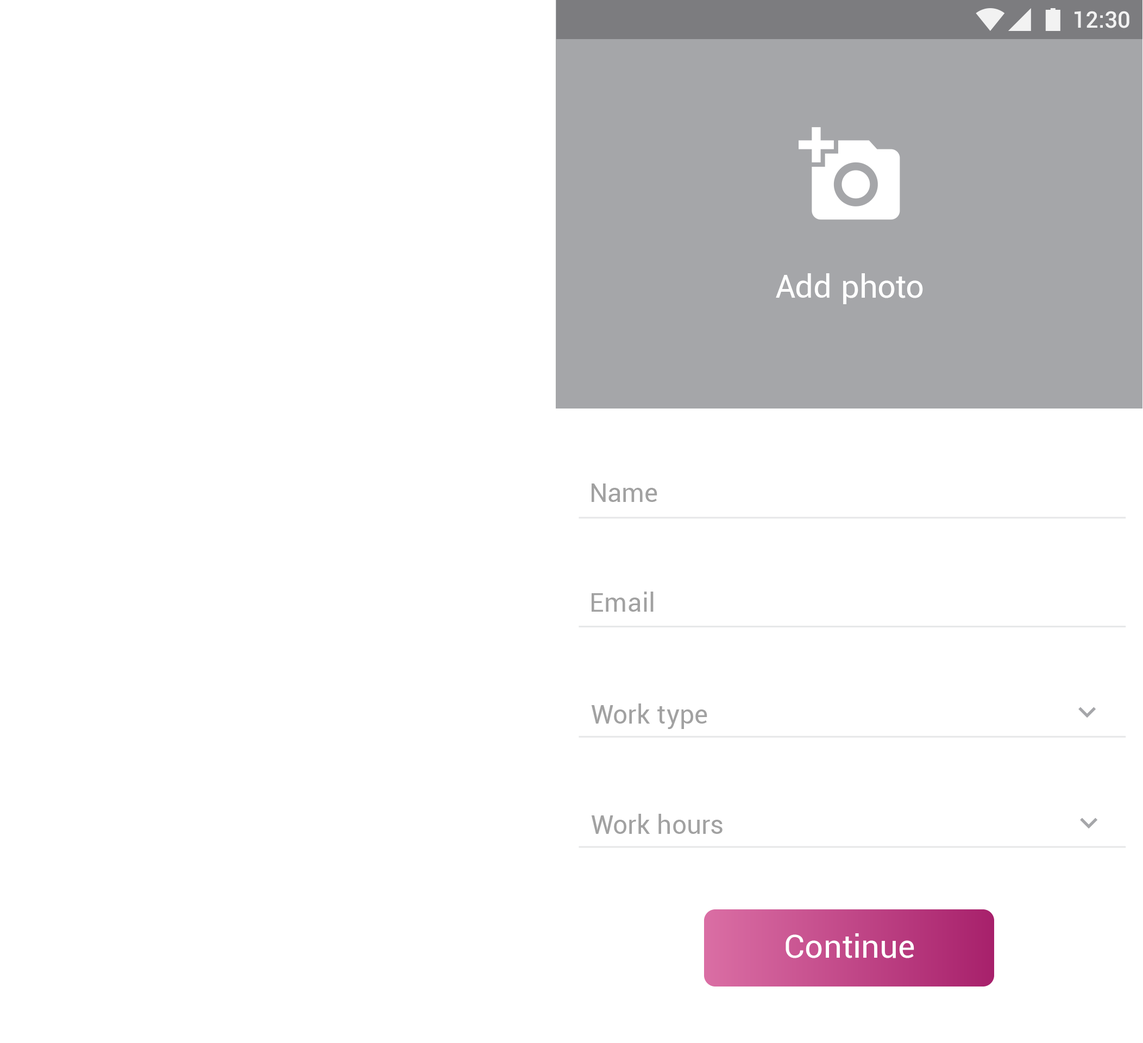
<style>
.page{position:relative;width:1143px;height:1043px;background:#ffffff}
.page>*{position:absolute;margin:0}
.t1{font:22.8px "Roboto-Medium";color:#ffffff}
.t2{font:32.6px "Roboto-Regular";letter-spacing:0.01em;color:#ffffff}
.t3{font:26.1px "Roboto-Regular";letter-spacing:0.01em;color:#a1a1a1}
.t4{font:32.6px "Roboto-Regular";color:#ffffff}
</style>
<div class="page">
<p class="t1" style="left:1075px;top:11px;width:55px;height:17px">12:30</p>
<p class="t2" style="left:776px;top:273px;width:147px;height:31px">Add photo</p>
<p class="t3" style="left:592px;top:484px;width:65px;height:18px">Name</p>
<p class="t3" style="left:592px;top:592px;width:62px;height:20px">Email</p>
<p class="t3" style="left:591px;top:704px;width:116px;height:25px">Work type</p>
<p class="t3" style="left:591px;top:814px;width:132px;height:20px">Work hours</p>
<p class="t4" style="left:786px;top:933px;width:128px;height:25px">Continue</p>
</div>
